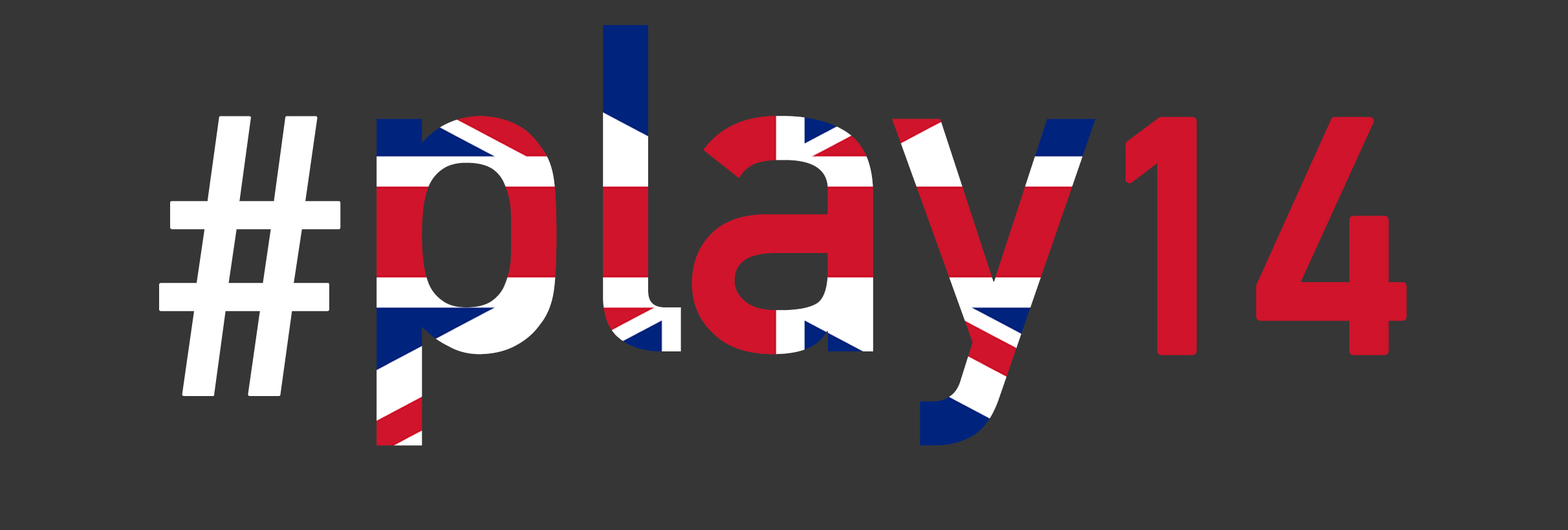
<style>
.page{position:relative;width:1568px;height:530px;background:#363636}
.page>*{position:absolute;margin:0}
.t1{font:458px "DINAlternate-Bold";letter-spacing:-0.025em}
.t2{font:389.3px "DINAlternate-Bold";letter-spacing:-0.025em;color:#ffffff;font-weight:bold}
.t3{font:323.7px "DINAlternate-Bold";letter-spacing:-0.025em;color:#cf142b;font-weight:bold}
</style>
<div class="page">
<p class="t1" style="left:376px;top:25px;width:720px;height:421px">play</p>
<p class="t2" style="left:160px;top:116px;width:180px;height:279px">#</p>
<p class="t3" style="left:1129px;top:120px;width:275px;height:232px">14</p>
</div>
